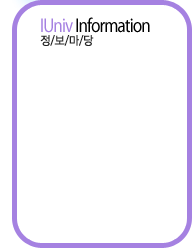
<style>
.page{position:relative;width:193px;height:248px;background:#ffffff}
.page>*{position:absolute;margin:0}
.t1{font:20px "MyriadPro-Regular";letter-spacing:-0.05em;color:#000000;scale:0.85 1}
.t2{font:20px "MyriadPro-Regular";letter-spacing:-0.05em;color:#a581e1;scale:0.85 1}
.t3{font:12px "YDI-WebG";letter-spacing:-0.075em;color:#222222;scale:0.9 1}
</style>
<div class="page">
<p class="t1" style="left:41px;top:17px;width:109px;height:16px"><span class="t2">IUniv </span>Information</p>
<p class="t3" style="left:40px;top:35px;width:54px;height:11px">정/보/마/당</p>
</div>
